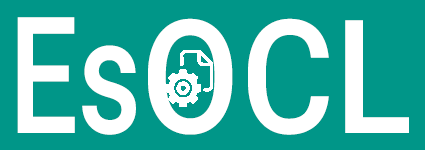
<style>
.page{position:relative;width:425px;height:150px;background:#009688}
.page>*{position:absolute;margin:0}
.t1{font:158.3px "Roboto-Medium";letter-spacing:0.01em;color:#ffffff;scale:0.9 1}
.t2{font:162.5px "Roboto-Medium";color:#ffffff;scale:0.75 1}
</style>
<div class="page">
<p class="t1" style="left:17px;top:17px;width:392px;height:118px"><span class="t2">Es</span>OCL</p>
</div>
